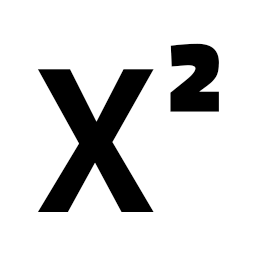
<style>
.page{position:relative;width:256px;height:256px;background:#ffffff}
.page>*{position:absolute;margin:0}
.t1{font:210px "TitilliumWeb-Bold";letter-spacing:0.05em;color:#000000}
</style>
<div class="page">
<p class="t1" style="left:37px;top:43px;width:182px;height:169px">X²</p>
</div>
